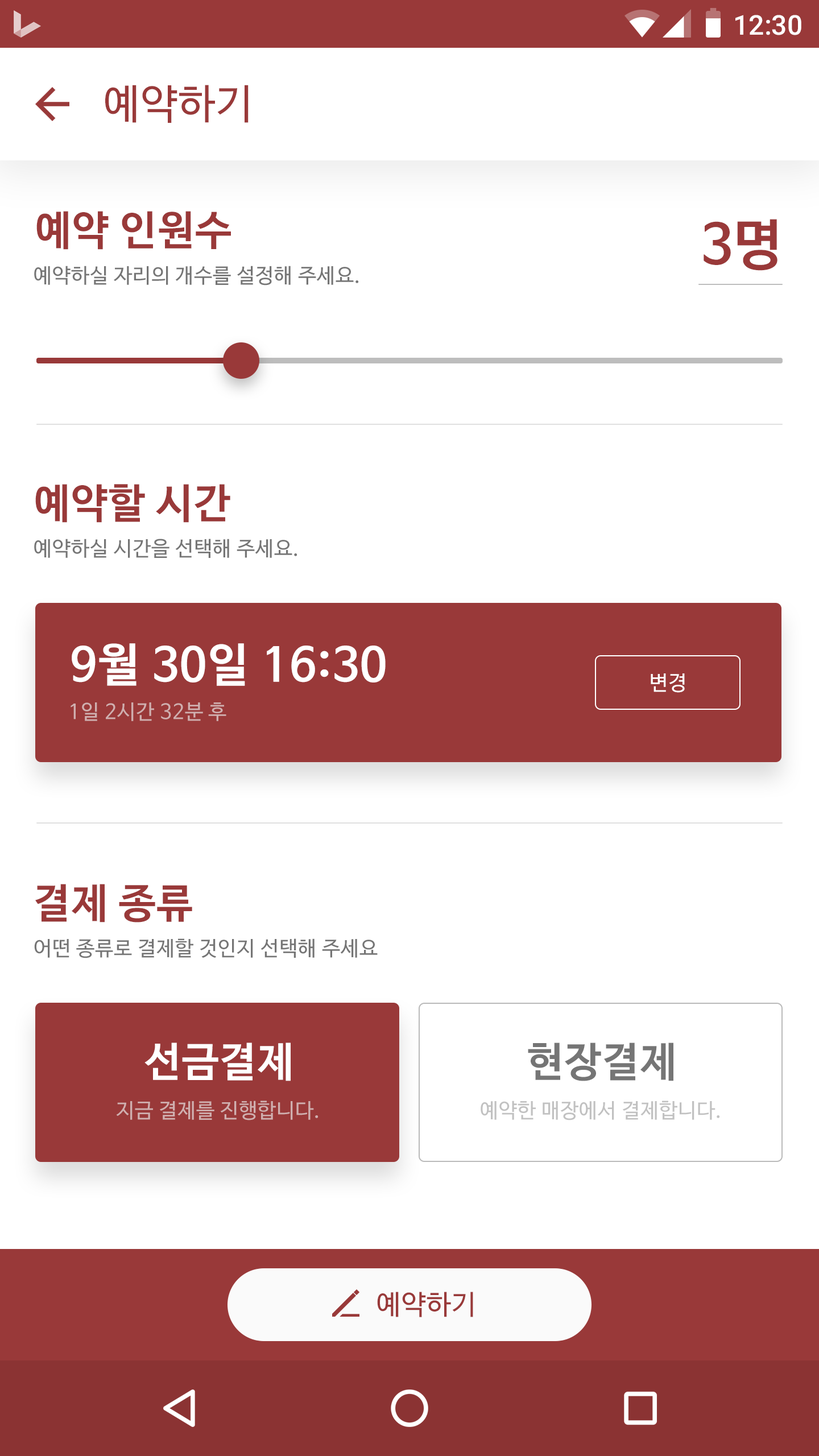
<style>
.page{position:relative;width:819px;height:1456px;background:#ffffff}
.page>*{position:absolute;margin:0}
.t1{font:27.3px "Roboto-Medium";color:#ffffff}
.t2{font:40.9px "NanumBarunGothic";letter-spacing:0.025em;color:#993939}
.t3{font:40.9px "NanumBarunGothicBold";letter-spacing:0.025em;color:#993939}
.t4{font:54.6px "NanumBarunGothicBold";letter-spacing:0.025em;color:#993939}
.t5{font:20.5px "NanumBarunGothic";letter-spacing:0.025em;color:#757575}
.t6{font:46.1px "NanumBarunGothicBold";letter-spacing:0.025em;color:#ffffff}
.t7{font:20.5px "NanumBarunGothic";letter-spacing:0.025em;color:#ffffff}
.t8{font:20.5px "NanumBarunGothic";letter-spacing:0.025em;color:#d0afaf}
.t9{font:40.9px "NanumBarunGothicBold";letter-spacing:0.025em;color:#ffffff}
.t10{font:40.9px "NanumBarunGothicBold";letter-spacing:0.025em;color:#757575}
.t11{font:20.5px "NanumBarunGothic";letter-spacing:0.025em;color:#c1c1c1}
.t12{font:27.3px "NanumBarunGothic";letter-spacing:0.025em;color:#993939}
</style>
<div class="page">
<p class="t1" style="left:735px;top:15px;width:66px;height:20px">12:30</p>
<p class="t2" style="left:105px;top:85px;width:144px;height:38px">예약하기</p>
<p class="t3" style="left:36px;top:211px;width:195px;height:39px">예약 인원수</p>
<p class="t4" style="left:704px;top:219px;width:73px;height:52px">3명</p>
<p class="t5" style="left:34px;top:266px;width:325px;height:20px">예약하실 자리의 개수를 설정해 주세요.</p>
<p class="t3" style="left:35px;top:484px;width:195px;height:39px">예약할 시간</p>
<p class="t5" style="left:34px;top:539px;width:263px;height:19px">예약하실 시간을 선택해 주세요.</p>
<p class="t6" style="left:72px;top:643px;width:314px;height:43px">9월 30일 16:30</p>
<p class="t7" style="left:651px;top:673px;width:34px;height:20px">변경</p>
<p class="t8" style="left:71px;top:702px;width:155px;height:19px">1일 2시간 32분 후</p>
<p class="t3" style="left:35px;top:884px;width:157px;height:39px">결제 종류</p>
<p class="t5" style="left:34px;top:938px;width:344px;height:20px">어떤 종류로 결제할 것인지 선택해 주세요</p>
<p class="t9" style="left:144px;top:1043px;width:147px;height:38px">선금결제</p>
<p class="t10" style="left:528px;top:1043px;width:145px;height:38px">현장결제</p>
<p class="t8" style="left:116px;top:1101px;width:202px;height:19px">지금 결제를 진행합니다.</p>
<p class="t11" style="left:481px;top:1101px;width:239px;height:19px">예약한 매장에서 결제합니다.</p>
<p class="t12" style="left:377px;top:1292px;width:96px;height:25px">예약하기</p>
</div>
